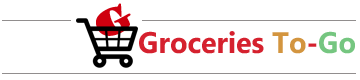
<style>
.page{position:relative;width:360px;height:80px;background:#ffffff}
.page>*{position:absolute;margin:0}
.t1{font:36px "GoudyStout";color:#cf000f}
.t2{font:29.8px "Ebrima-Bold";scale:0.96 1}
</style>
<div class="page">
<p class="t1" style="left:96px;top:3px;width:35px;height:33px;rotate:-23deg">G</p>
<p class="t2" style="left:139px;top:31px;width:216px;height:23px">Groceries To-Go</p>
</div>
